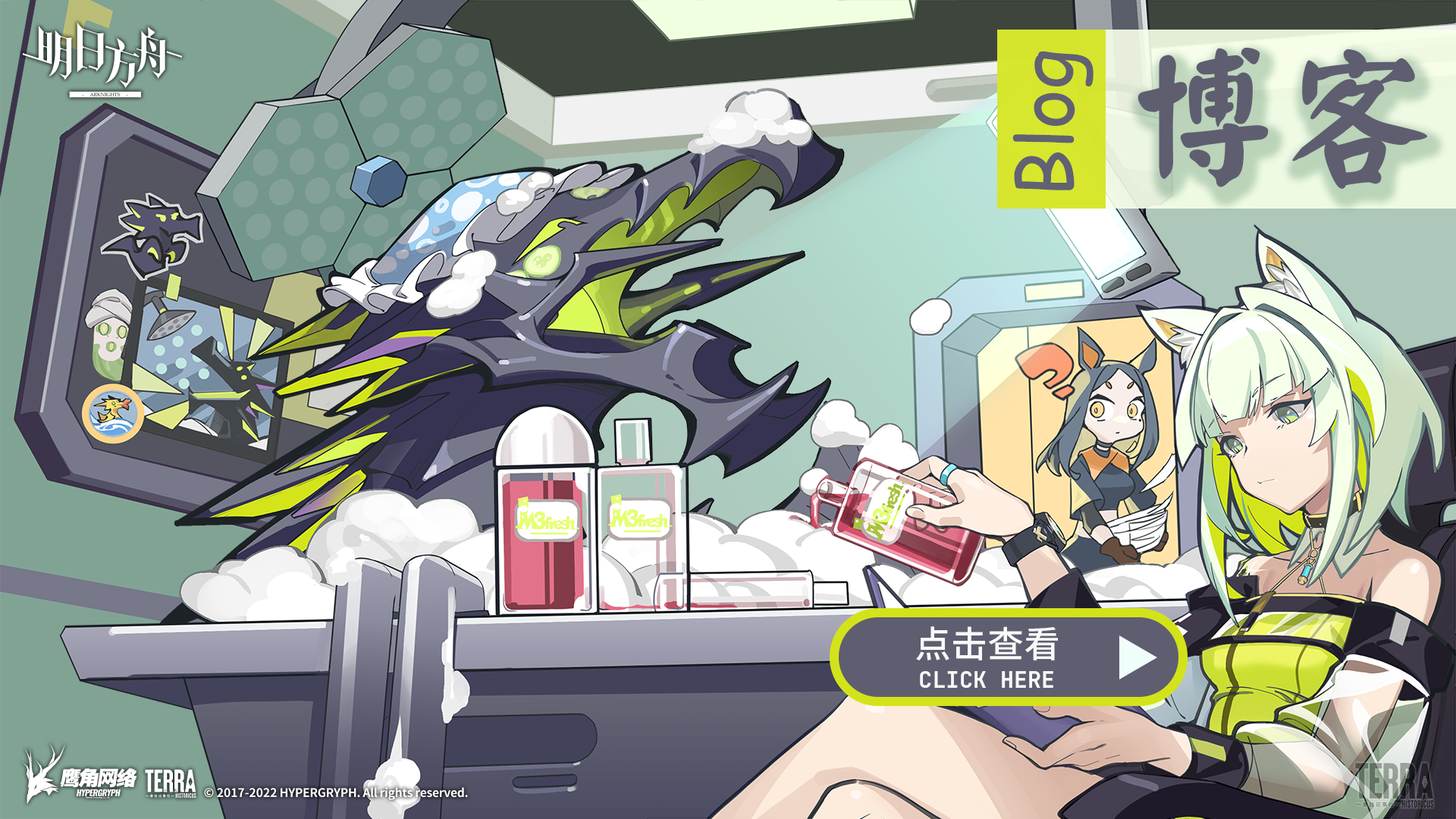
<style>
.page{position:relative;width:1456px;height:819px}
.page>*{position:absolute;margin:0}
.t1{font:75.8px "ComicSansMS";color:#616172}
.t2{font:151.7px "DFYanKaiW7-GB";color:#5e5e70}
.t3{font:36.4px "SourceHanSansSC-Medium";color:#f5fbf7}
.t4{font:22.7px "JetBrainsMono-Bold";color:#f5fbf7}
</style>
<div class="page">
<p class="t1" style="left:1012px;top:51px;width:82px;height:139px;rotate:-90deg">Blog</p>
<p class="t2" style="left:1137px;top:47px;width:290px;height:142px">博客</p>
<p class="t3" style="left:916px;top:626px;width:142px;height:34px">点击查看</p>
<p class="t4" style="left:920px;top:671px;width:133px;height:17px">CLICK HERE</p>
</div>
